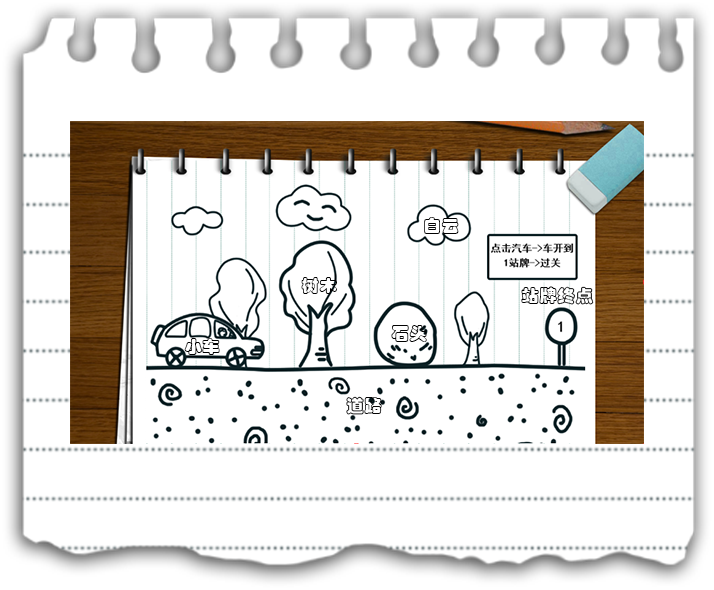
<style>
.page{position:relative;width:714px;height:590px;background:#ffffff}
.page>*{position:absolute;margin:0}
.t1{font:18px "STCaiyun";color:#020202}
</style>
<div class="page">
<p class="t1" style="left:424px;top:217px;width:35px;height:17px">白云</p>
<p class="t1" style="left:301px;top:277px;width:36px;height:17px">树木</p>
<p class="t1" style="left:521px;top:286px;width:73px;height:19px">站牌终点</p>
<p class="t1" style="left:391px;top:325px;width:36px;height:17px">石头</p>
<p class="t1" style="left:184px;top:338px;width:36px;height:17px">小车</p>
<p class="t1" style="left:346px;top:396px;width:36px;height:19px">道路</p>
</div>
